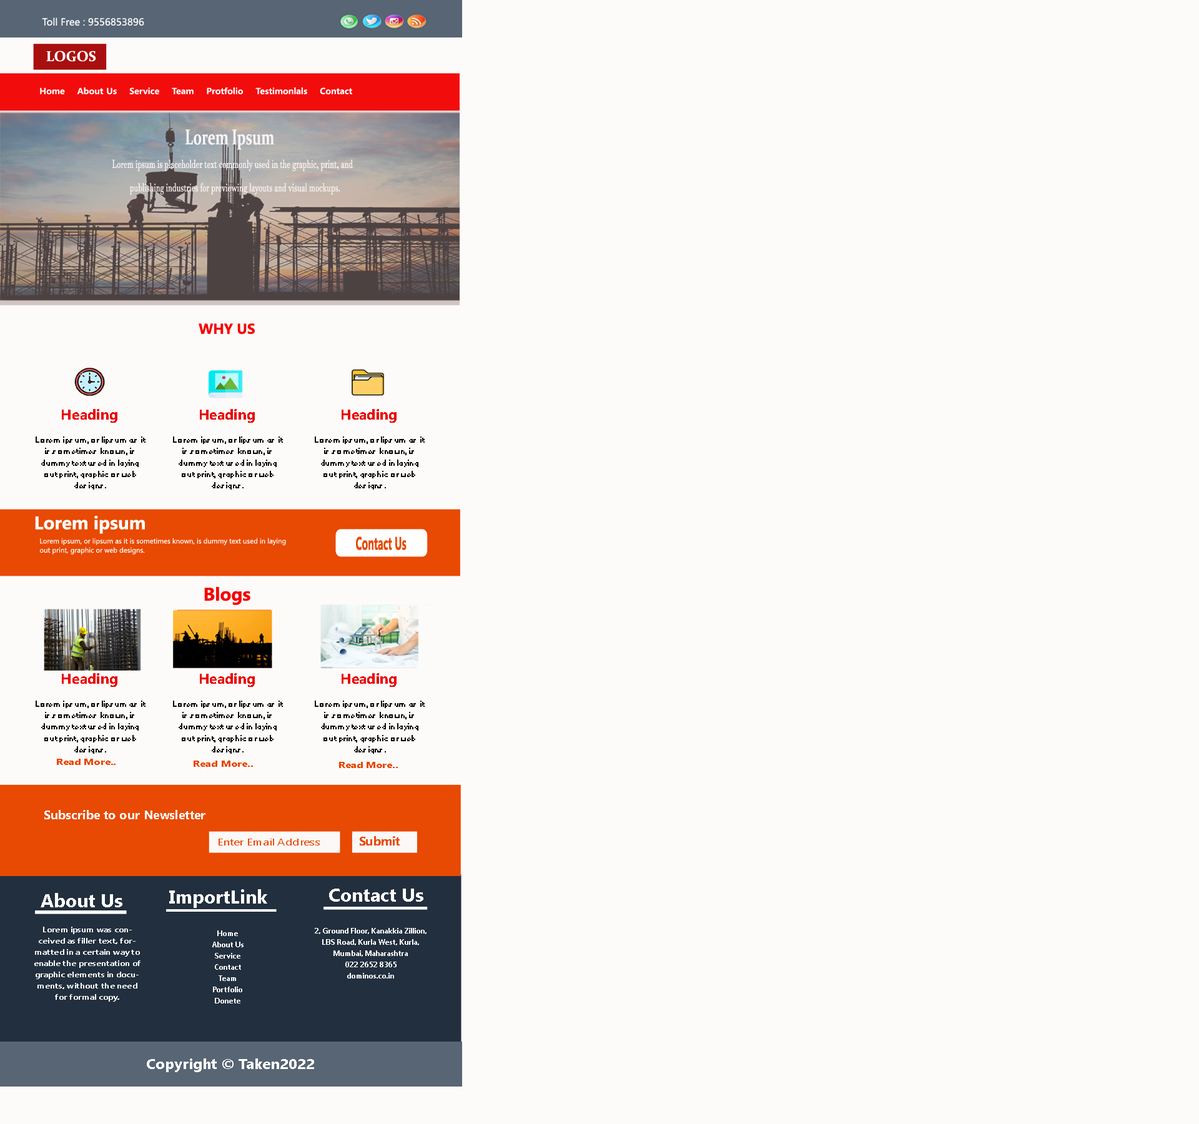
<style>
.page{position:relative;width:1199px;height:1124px;background:#fdfbfa}
.page>*{position:absolute;margin:0}
.t1{font:9.6px "MicrosoftYaHeiUI";color:#f5f7fa}
.t2{font:14.4px "Constantia-Bold";color:#fffefe}
.t3{font:8.6px "MalgunGothicBold";color:#fdfbfb}
.t4{font:11.5px/23.5px "JavaneseText";color:#fbf3f3;scale:0.66 1}
.t5{font:5.7px/23.5px "Constantia-Bold";color:#fbf3f3;scale:0.66 1}
.t6{font:21.6px/23.5px "Constantia-Bold";color:#fbf3f3;scale:0.66 1}
.t7{font:14.4px "Gadugi-Bold";color:#f60202}
.t8{font:8.9px/11.5px "Small Fonts";color:#090909}
.t9{font:14.4px/5.7px "Gadugi-Bold";color:#ea0606}
.t10{font:18.3px "Gadugi-Bold";color:#fefefe}
.t11{font:7.1px/9.1px "Gadugi";color:#fefefe}
.t12{font:18.3px "Gadugi-Bold";color:#e84903;scale:0.55 1}
.t13{font:18.3px "Gadugi-Bold";color:#f60202}
.t14{font:8.8px "Gadugi-Bold";color:#e84903;scale:1.19 1}
.t15{font:12.2px "Gadugi-Bold";color:#f9f7f6}
.t16{font:9.1px "Gadugi";color:#e74c08;scale:1.29 1}
.t17{font:12.2px "Gadugi-Bold";color:#e74c08}
.t18{font:18.7px "Gadugi-Bold";color:#fefeff}
.t19{font:7.5px/11.2px "Gadugi-Bold";color:#fefeff;scale:1.16 1}
.t20{font:7.5px/11.2px "Gadugi-Bold";color:#fefeff}
.t21{font:14.2px "Gadugi-Bold";color:#fefefe;scale:1.05 1}
</style>
<div class="page">
<p class="t1" style="left:42px;top:17px;width:102px;height:9px">Toll Free : 9556853896</p>
<p class="t2" style="left:46px;top:51px;width:50px;height:11px">LOGOS</p>
<p class="t3" style="left:40px;top:87px;width:312px;height:7px">Home    About Us    Service    Team    Protfolio    Testimonlals    Contact</p>
<p class="t4" style="left:112px;top:129px;width:241px;height:66px;text-align:center"><span class="t5">                      </span><span class="t6"> Lorem Ipsum<br>             </span>  Lorem ipsum is placeholder text commonly used in the graphic, print, and<br>                      publishing industries for previewing layouts and visual mockups.</p>
<p class="t7" style="left:199px;top:324px;width:56px;height:10px">WHY US</p>
<p class="t8" style="left:36px;top:409px;width:110px;height:81px;text-align:center"><span class="t9">Heading<br><br></span>Lorem ipsum, or lipsum as it is sometimes known, is dummy text used in laying out print, graphic or web designs.</p>
<p class="t8" style="left:173px;top:409px;width:110px;height:81px;text-align:center"><span class="t9">Heading<br><br></span>Lorem ipsum, or lipsum as it is sometimes known, is dummy text used in laying out print, graphic or web designs.</p>
<p class="t8" style="left:315px;top:409px;width:110px;height:81px;text-align:center"><span class="t9">Heading<br><br></span>Lorem ipsum, or lipsum as it is sometimes known, is dummy text used in laying out print, graphic or web designs.</p>
<p class="t10" style="left:35px;top:515px;width:110px;height:19px">Lorem ipsum</p>
<p class="t11" style="left:39px;top:538px;width:247px;height:17px">Lorem ipsum, or lipsum as it is sometimes known, is dummy text used in laying out print, graphic or web designs.</p>
<p class="t12" style="left:356px;top:537px;width:51px;height:13px">Contact Us</p>
<p class="t13" style="left:204px;top:587px;width:46px;height:18px">Blogs</p>
<p class="t8" style="left:36px;top:673px;width:110px;height:81px;text-align:center"><span class="t9">Heading<br><br></span>Lorem ipsum, or lipsum as it is sometimes known, is dummy text used in laying out print, graphic or web designs.</p>
<p class="t8" style="left:173px;top:673px;width:110px;height:81px;text-align:center"><span class="t9">Heading<br><br></span>Lorem ipsum, or lipsum as it is sometimes known, is dummy text used in laying out print, graphic or web designs.</p>
<p class="t8" style="left:315px;top:673px;width:110px;height:81px;text-align:center"><span class="t9">Heading<br><br></span>Lorem ipsum, or lipsum as it is sometimes known, is dummy text used in laying out print, graphic or web designs.</p>
<p class="t14" style="left:57px;top:759px;width:59px;height:6px">Read More..</p>
<p class="t14" style="left:194px;top:761px;width:59px;height:6px">Read More..</p>
<p class="t14" style="left:339px;top:762px;width:59px;height:6px">Read More..</p>
<p class="t15" style="left:44px;top:810px;width:161px;height:9px">Subscribe to our Newsletter</p>
<p class="t16" style="left:219px;top:839px;width:101px;height:7px">Enter Email Address</p>
<p class="t17" style="left:360px;top:836px;width:40px;height:10px">Submit</p>
<p class="t18" style="left:41px;top:893px;width:81px;height:15px">About Us</p>
<p class="t18" style="left:169px;top:889px;width:98px;height:19px">ImportLink</p>
<p class="t18" style="left:329px;top:889px;width:94px;height:13px">Contact Us</p>
<p class="t19" style="left:34px;top:927px;width:107px;height:75px;text-align:center">Lorem ipsum was conceived as filler text, formatted in a certain way to enable the presentation of graphic elements in documents, without the need for formal copy.</p>
<p class="t20" style="left:315px;top:928px;width:112px;height:51px;text-align:center">2, Ground Floor, Kanakkia Zillion, LBS Road, Kurla West, Kurla, Mumbai, Maharashtra<br>022 2652 8365<br>dominos.co.in</p>
<p class="t20" style="left:212px;top:931px;width:32px;height:73px;text-align:center">Home<br>About Us<br>Service<br>Contact<br>Team<br>Portfolio<br>Donete</p>
<p class="t21" style="left:147px;top:1059px;width:167px;height:13px">Copyright © Taken2022</p>
</div>
